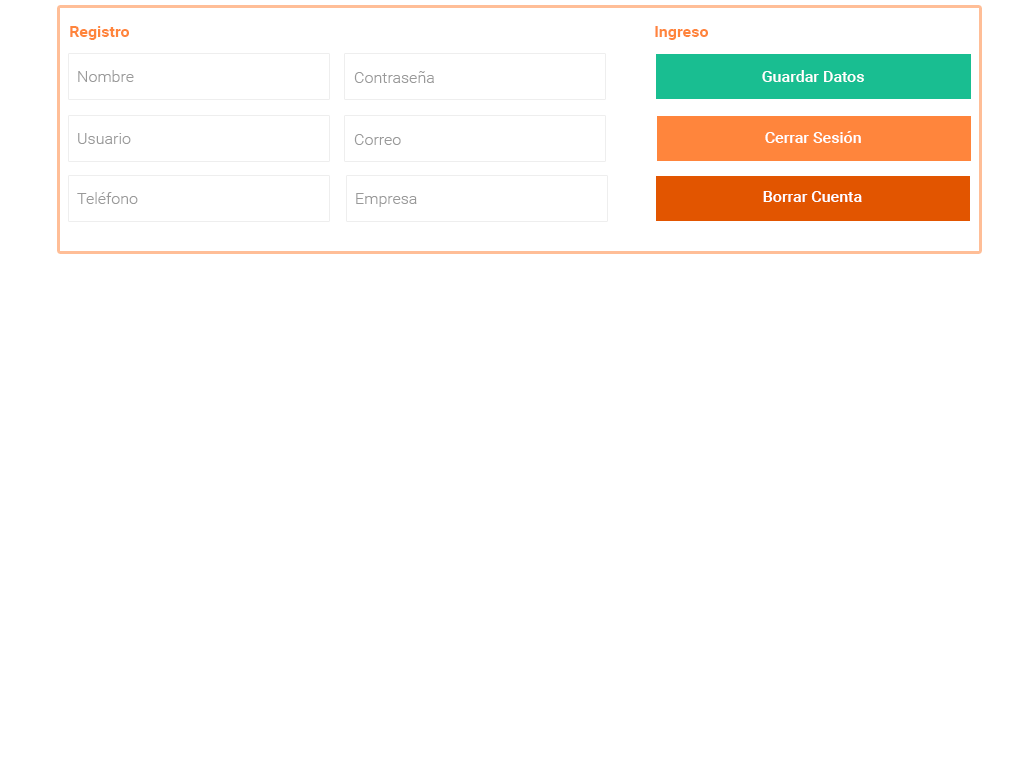
<style>
.page{position:relative;width:1024px;height:768px;background:#ffffff}
.page>*{position:absolute;margin:0}
.t1{font:16px "Roboto-Bold";color:#ff853c}
.t2{font:16px "Roboto-Light";color:#999999}
.t3{font:16px "Roboto-Medium";color:#ffffff}
</style>
<div class="page">
<p class="t1" style="left:70px;top:26px;width:59px;height:14px">Registro</p>
<p class="t1" style="left:655px;top:26px;width:53px;height:14px">Ingreso</p>
<p class="t2" style="left:78px;top:70px;width:56px;height:12px">Nombre</p>
<p class="t2" style="left:354px;top:71px;width:80px;height:12px">Contraseña</p>
<p class="t3" style="left:762px;top:70px;width:102px;height:12px">Guardar Datos</p>
<p class="t2" style="left:78px;top:133px;width:53px;height:11px">Usuario</p>
<p class="t2" style="left:354px;top:134px;width:47px;height:11px">Correo</p>
<p class="t3" style="left:765px;top:131px;width:96px;height:12px">Cerrar Sesión</p>
<p class="t2" style="left:77px;top:192px;width:61px;height:12px">Teléfono</p>
<p class="t2" style="left:356px;top:193px;width:61px;height:14px">Empresa</p>
<p class="t3" style="left:763px;top:191px;width:99px;height:11px">Borrar Cuenta</p>
</div>
